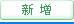
<style>
.page{position:relative;width:74px;height:24px;background:#ffffff}
.page>*{position:absolute;margin:0}
.t1{font:12px "SimSun";color:#42985e}
</style>
<div class="page">
<p class="t1" style="left:22px;top:4px;width:29px;height:11px">新 增</p>
</div>
